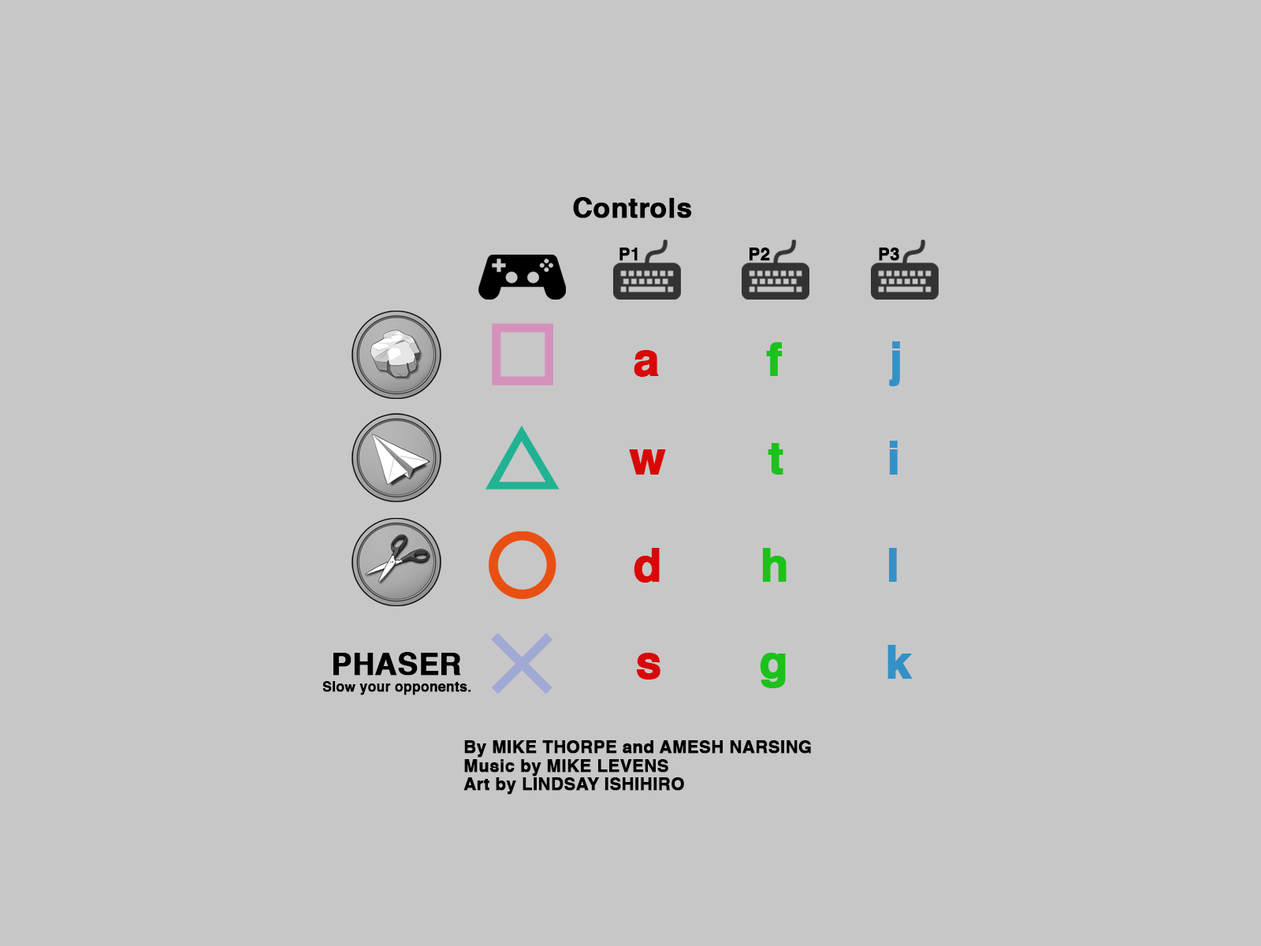
<style>
.page{position:relative;width:1261px;height:946px;background:#c7c7c7}
.page>*{position:absolute;margin:0}
.t1{font:27.7px "Helvetica-Bold";color:#000000;font-weight:bold}
.t2{font:17.3px "Helvetica-Bold";color:#000000;font-weight:bold}
.t3{font:46.1px "Helvetica-Bold";letter-spacing:1em;color:#d80808;font-weight:bold}
.t4{font:46.1px "Helvetica-Bold";letter-spacing:1em;color:#1bc21b;font-weight:bold}
.t5{font:46.1px "Helvetica-Bold";letter-spacing:1em;color:#3491c7;font-weight:bold}
.t6{font:46.1px "Helvetica-Bold";letter-spacing:0.95em;color:#d80808;font-weight:bold}
.t7{font:46.1px "Helvetica-Bold";letter-spacing:0.95em;color:#1bc21b;font-weight:bold}
.t8{font:46.1px "Helvetica-Bold";letter-spacing:0.95em;color:#3491c7;font-weight:bold}
.t9{font:46.1px "Helvetica-Bold";letter-spacing:0.9em;color:#d80808;font-weight:bold}
.t10{font:46.1px "Helvetica-Bold";letter-spacing:0.9em;color:#1bc21b;font-weight:bold}
.t11{font:46.1px "Helvetica-Bold";letter-spacing:0.9em;color:#3491c7;font-weight:bold}
.t12{font:30.2px "Helvetica-Bold";color:#000000;font-weight:bold}
.t13{font:13.6px "Helvetica-Bold";color:#000000;font-weight:bold}
</style>
<div class="page">
<p class="t1" style="left:573px;top:197px;width:119px;height:21px">Controls</p>
<p class="t2" style="left:619px;top:247px;width:19px;height:14px">P1</p>
<p class="t2" style="left:749px;top:247px;width:21px;height:14px">P2</p>
<p class="t2" style="left:879px;top:247px;width:20px;height:14px">P3</p>
<p class="t3" style="left:634px;top:341px;width:266px;height:45px">a <span class="t4">f </span><span class="t5">j</span></p>
<p class="t6" style="left:629px;top:441px;width:269px;height:33px">w <span class="t7">t </span><span class="t8">i</span></p>
<p class="t9" style="left:634px;top:548px;width:263px;height:34px">d <span class="t10">h </span><span class="t11">l</span></p>
<p class="t12" style="left:333px;top:652px;width:128px;height:23px">PHASER</p>
<p class="t9" style="left:636px;top:645px;width:276px;height:43px">s <span class="t10">g </span><span class="t11">k</span></p>
<p class="t13" style="left:322px;top:681px;width:149px;height:14px">Slow your opponents.</p>
<p class="t2" style="left:464px;top:740px;width:347px;height:17px">By MIKE THORPE and AMESH NARSING</p>
<p class="t2" style="left:464px;top:759px;width:204px;height:17px">Music by MIKE LEVENS</p>
<p class="t2" style="left:463px;top:777px;width:221px;height:17px">Art by LINDSAY ISHIHIRO</p>
</div>
